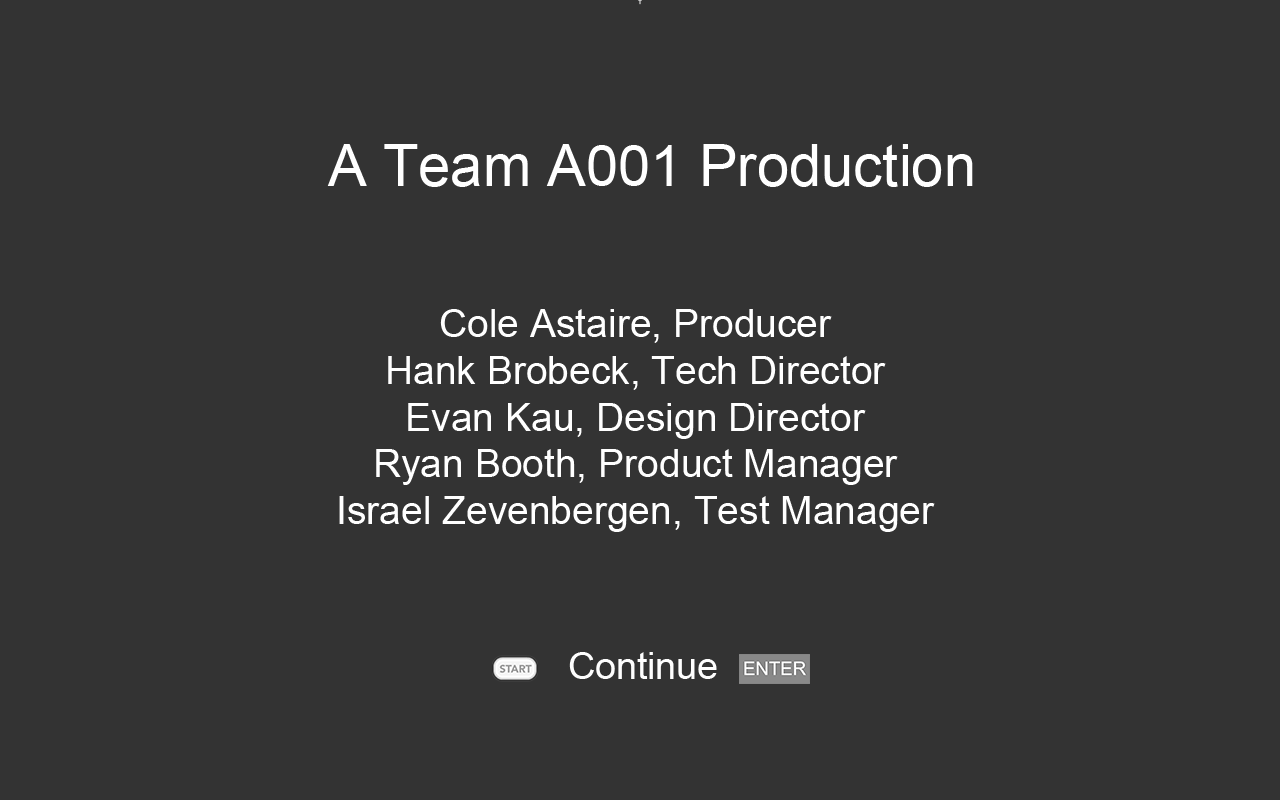
<style>
.page{position:relative;width:1280px;height:800px;background:#333333}
.page>*{position:absolute;margin:0}
.t1{font:6px "ArialMT"}
.t2{font:58px "ArialMT";color:#ffffff}
.t3{font:39px "ArialMT";color:#ffffff}
</style>
<div class="page">
<p class="t1" style="left:638px;top:0px;width:4px;height:5px">T</p>
<p class="t2" style="left:327px;top:144px;width:646px;height:43px">A Team A001 Production</p>
<p class="t3" style="left:339px;top:309px;width:596px;height:223px;text-align:center">Cole Astaire, Producer<br>Hank Brobeck, Tech Director<br>Evan Kau, Design Director<br>Ryan Booth, Product Manager<br>Israel Zevenbergen, Test Manager</p>
</div>
